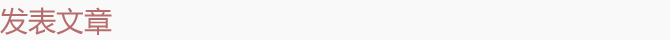
<style>
.page{position:relative;width:670px;height:40px;background:#f9f9f9}
.page>*{position:absolute;margin:0}
.t1{font:28px "MicrosoftYaHei";color:#b66d6d}
</style>
<div class="page">
<p class="t1" style="left:0px;top:7px;width:112px;height:28px">发表文章</p>
</div>
